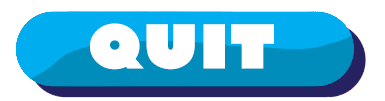
<style>
.page{position:relative;width:385px;height:101px;background:#ffffff}
.page>*{position:absolute;margin:0}
.t1{font:59.3px "GillSans-UltraBold";color:#ffffff;scale:1.09 1}
</style>
<div class="page">
<p class="t1" style="left:90px;top:23px;width:184px;height:47px">QUIT</p>
</div>
